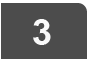
<style>
.page{position:relative;width:90px;height:60px;background:#4c4c4c}
.page>*{position:absolute;margin:0}
.t1{font:36px "Arial-BoldMT";color:#fafafa}
</style>
<div class="page">
<p class="t1" style="left:33px;top:19px;width:18px;height:26px">3</p>
</div>
